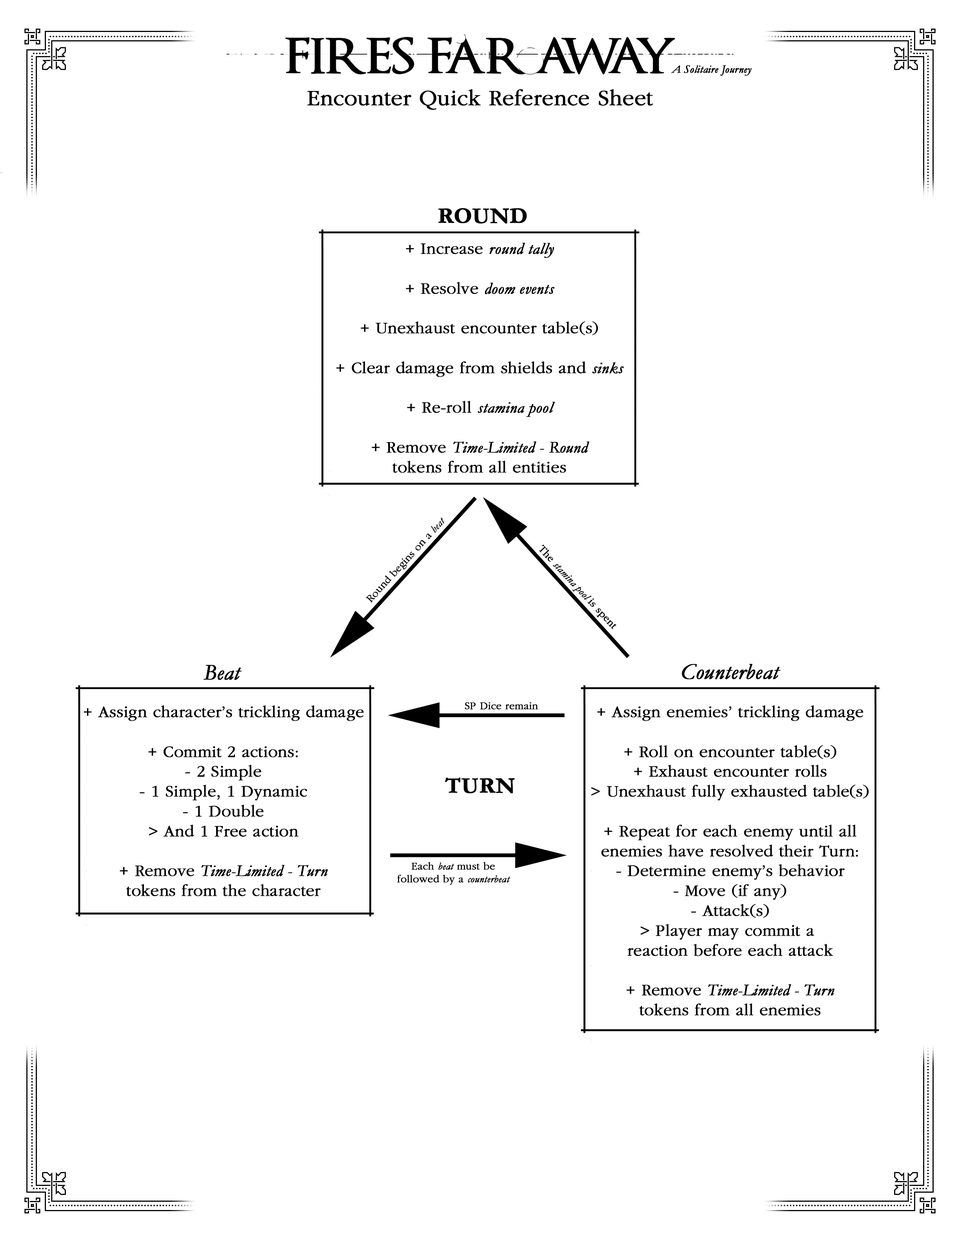
<style>
.page{position:relative;width:960px;height:1242px;background:#ffffff}
.page>*{position:absolute;margin:0}
.t1{font:11.3px "Garamond-Italic";color:#010101;font-weight:bold}
.t2{font:22.6px "Garamond";color:#000000;font-weight:bold}
.t3{font:22.6px "Garamond-Bold";color:#000000;font-weight:bold}
.t4{font:16.6px "Garamond";color:#000000;font-weight:bold}
.t5{font:16.6px "Garamond-Italic";color:#000000;font-weight:bold}
.t6{font:10.5px "Garamond";color:#000000;font-weight:bold}
.t7{font:10.5px "Garamond-Italic";color:#000000;font-weight:bold}
.t8{font:22.6px "Garamond-Italic";color:#000000;font-weight:bold}
</style>
<div class="page">
<p class="t1" style="left:671px;top:65px;width:81px;height:11px">A Solitaire Journey</p>
<p class="t2" style="left:307px;top:89px;width:346px;height:21px">Encounter Quick Reference Sheet</p>
<p class="t3" style="left:438px;top:208px;width:89px;height:16px">ROUND</p>
<p class="t4" style="left:336px;top:243px;width:288px;height:230px;text-align:center">+ Increase <span class="t5">round tally<br><br></span>+ Resolve <span class="t5">doom events<br><br></span>+ Unexhaust encounter table(s)<br><br>+ Clear damage from shields and <span class="t5">sinks<br><br></span>+ Re-roll <span class="t5">stamina pool<br><br></span>+ Remove <span class="t5">Time-Limited - Round</span><br>tokens from all entities</p>
<p class="t6" style="left:366px;top:518px;width:78px;height:85px;rotate:-48deg">Round begins on a <span class="t7">beat</span></p>
<p class="t7" style="left:539px;top:545px;width:77px;height:84px;rotate:47deg"><span class="t6">The </span>stamina pool <span class="t6">is spent</span></p>
<p class="t8" style="left:203px;top:665px;width:39px;height:15px">Beat</p>
<p class="t8" style="left:682px;top:664px;width:98px;height:15px">Counterbeat</p>
<p class="t4" style="left:84px;top:705px;width:280px;height:191px;text-align:center">+ Assign character’s trickling damage<br><br>+ Commit 2 actions:<br>- 2 Simple<br>- 1 Simple, 1 Dynamic<br>- 1 Double<br>&gt; And 1 Free action<br><br>+ Remove <span class="t5">Time-Limited - Turn</span><br>tokens from the character</p>
<p class="t6" style="left:465px;top:702px;width:73px;height:8px">SP Dice remain</p>
<p class="t4" style="left:591px;top:705px;width:278px;height:311px;text-align:center">+ Assign enemies’ trickling damage<br><br>+ Roll on encounter table(s)<br>+ Exhaust encounter rolls<br>&gt; Unexhaust fully exhausted table(s)<br> <br>+ Repeat for each enemy until all<br>enemies have resolved their Turn:<br>- Determine enemy’s behavior<br>- Move (if any)<br>- Attack(s)<br>&gt; Player may commit a <br>reaction before each attack<br><br>+ Remove <span class="t5">Time-Limited - Turn</span><br>tokens from all enemies</p>
<p class="t3" style="left:445px;top:778px;width:70px;height:16px">TURN</p>
<p class="t6" style="left:397px;top:862px;width:113px;height:23px;text-align:center">Each <span class="t7">beat</span> must be<br>followed by a <span class="t7">counterbeat</span></p>
</div>
